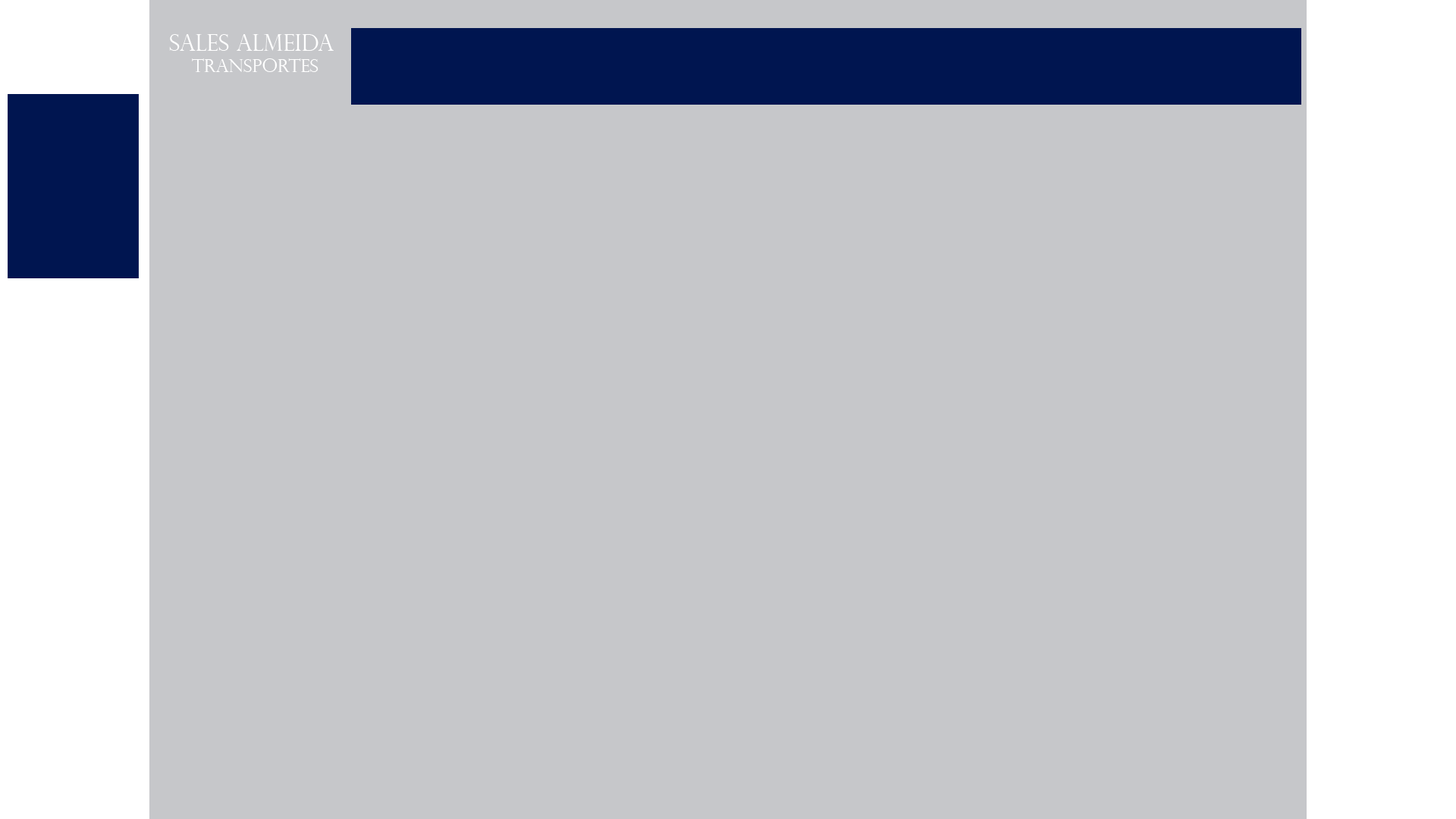
<style>
.page{position:relative;width:1456px;height:819px;background:#c6c7ca}
.page>*{position:absolute;margin:0}
.t1{font:22.7px "PerpetuaTitlingMT-Light";color:#ffffff}
.t2{font:18.2px "PerpetuaTitlingMT-Light";color:#ffffff}
</style>
<div class="page">
<p class="t1" style="left:169px;top:34px;width:165px;height:38px;text-align:center">Sales Almeida <br><span class="t2">Transportes</span></p>
</div>
